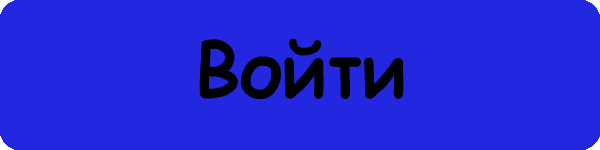
<style>
.page{position:relative;width:600px;height:150px;background:#2327e0}
.page>*{position:absolute;margin:0}
.t1{font:72px "ComicSansMS";color:#000000}
</style>
<div class="page">
<p class="t1" style="left:200px;top:39px;width:203px;height:59px">Войти</p>
</div>
